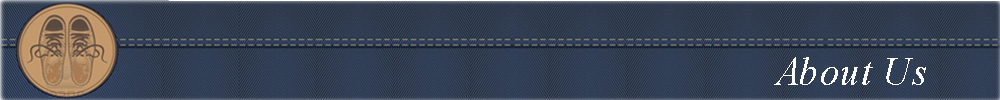
<style>
.page{position:relative;width:1000px;height:100px}
.page>*{position:absolute;margin:0}
.t1{font:40.2px "TimesNewRomanPS-ItalicMT";letter-spacing:0.01em;color:#fefefe;scale:0.95 1}
</style>
<div class="page">
<p class="t1" style="left:774px;top:57px;width:152px;height:28px">About Us</p>
</div>
